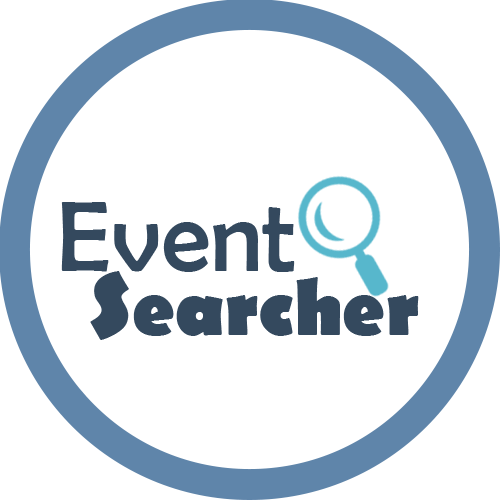
<style>
.page{position:relative;width:500px;height:500px;background:#ffffff}
.page>*{position:absolute;margin:0}
.t1{font:100px "BerlinSansFB-Reg";color:#34495e}
.t2{font:80px "BerlinSansFB-Bold";color:#34495e}
.t3{font:91px "BerlinSansFB-Bold";color:#34495e}
</style>
<div class="page">
<p class="t1" style="left:61px;top:202px;width:234px;height:70px">Event</p>
<p class="t2" style="left:90px;top:271px;width:329px;height:69px"><span class="t3">S</span>earcher</p>
</div>
